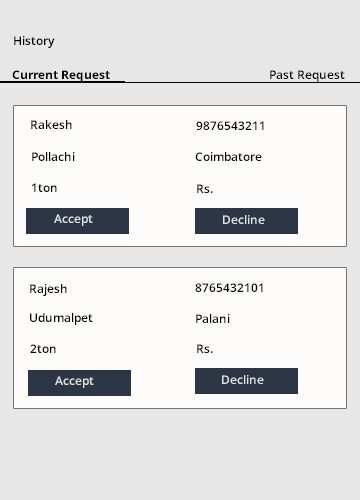
<style>
.page{position:relative;width:360px;height:500px;background:#fefbfb}
.page>*{position:absolute;margin:0}
.t1{font:12px "OpenSans-Semibold";color:#000000}
.t2{font:12px "OpenSans-Bold";color:#000000}
.t3{font:12px "OpenSans-Semibold";color:#e0e1e2}
.t4{font:12px "OpenSans-Semibold";color:#030000}
</style>
<div class="page">
<p class="t1" style="left:14px;top:36px;width:41px;height:12px">History</p>
<p class="t2" style="left:12px;top:70px;width:98px;height:12px">Current Request</p>
<p class="t1" style="left:270px;top:70px;width:75px;height:12px">Past Request</p>
<p class="t1" style="left:31px;top:120px;width:41px;height:9px">Rakesh</p>
<p class="t1" style="left:196px;top:121px;width:68px;height:9px">9876543211</p>
<p class="t1" style="left:32px;top:152px;width:43px;height:9px">Pollachi</p>
<p class="t1" style="left:195px;top:152px;width:67px;height:9px">Coimbatore</p>
<p class="t1" style="left:32px;top:183px;width:25px;height:9px">1ton</p>
<p class="t1" style="left:197px;top:184px;width:16px;height:9px">Rs.</p>
<p class="t3" style="left:54px;top:214px;width:39px;height:12px">Accept</p>
<p class="t3" style="left:223px;top:215px;width:42px;height:9px">Decline</p>
<p class="t4" style="left:30px;top:284px;width:37px;height:12px">Rajesh</p>
<p class="t4" style="left:195px;top:283px;width:68px;height:9px">8765432101</p>
<p class="t4" style="left:30px;top:313px;width:63px;height:12px">Udumalpet</p>
<p class="t4" style="left:196px;top:314px;width:34px;height:9px">Palani</p>
<p class="t4" style="left:30px;top:344px;width:26px;height:9px">2ton</p>
<p class="t4" style="left:197px;top:344px;width:16px;height:9px">Rs.</p>
<p class="t3" style="left:55px;top:376px;width:39px;height:12px">Accept</p>
<p class="t3" style="left:222px;top:375px;width:42px;height:9px">Decline</p>
</div>
